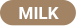
<style>
.page{position:relative;width:76px;height:26px;background:#a28465}
.page>*{position:absolute;margin:0}
.t1{font:17px "Roboto-Bold";color:#ffffff}
</style>
<div class="page">
<p class="t1" style="left:19px;top:7px;width:40px;height:12px">MILK</p>
</div>
